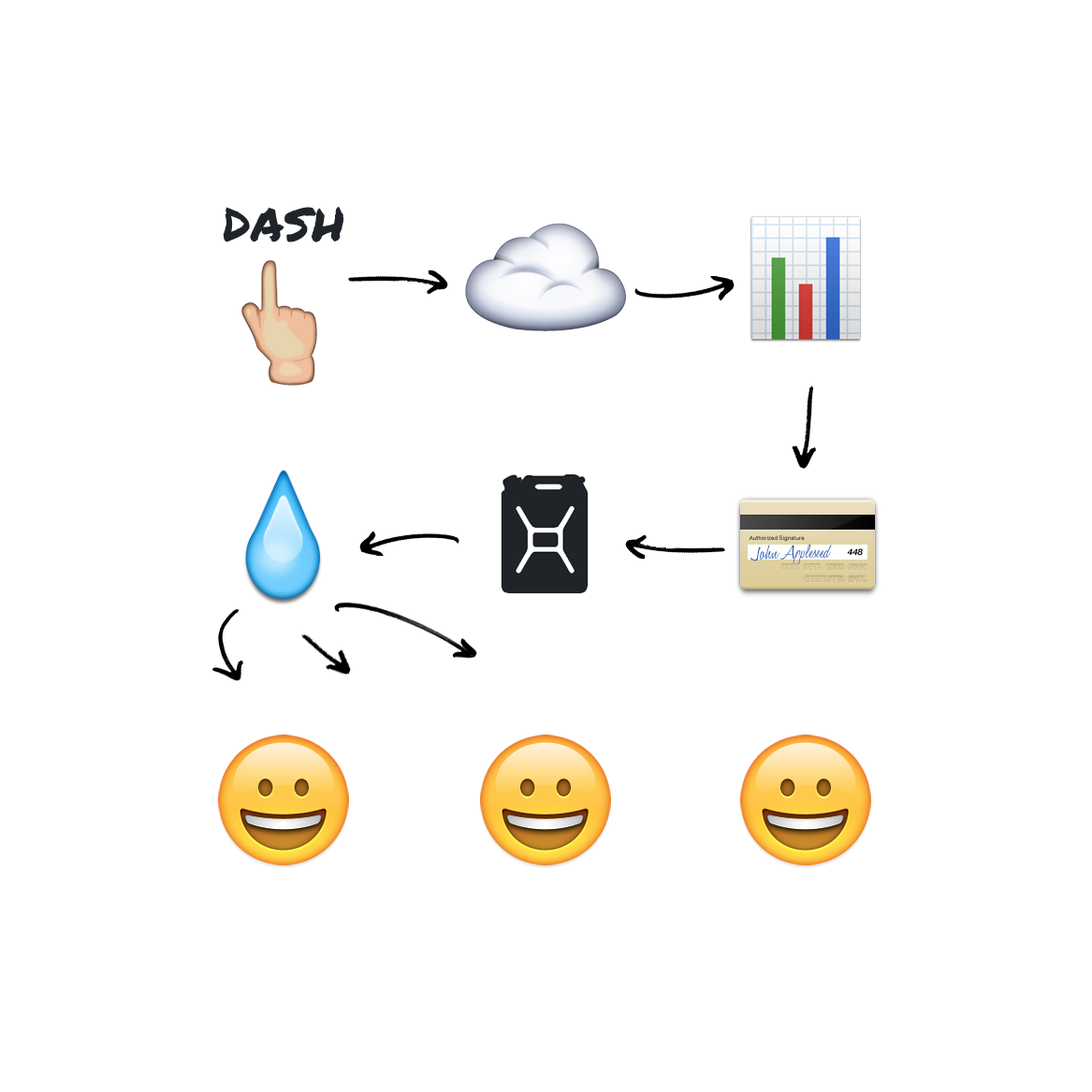
<style>
.page{position:relative;width:1092px;height:1092px;background:#ffffff}
.page>*{position:absolute;margin:0}
.t1{font:46.8px "PermanentMarker";letter-spacing:0.02em;color:#202428}
</style>
<div class="page">
<p class="t1" style="left:223px;top:207px;width:120px;height:35px">DASH</p>
</div>
